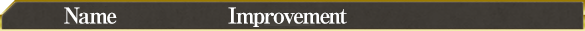
<style>
.page{position:relative;width:585px;height:31px}
.page>*{position:absolute;margin:0}
.t1{font:22px "RyuminPro-ExBold";letter-spacing:-0.08em;color:#ffffff}
</style>
<div class="page">
<p class="t1" style="left:64px;top:7px;width:53px;height:17px">Name</p>
<p class="t1" style="left:228px;top:7px;width:119px;height:20px">Improvement</p>
</div>
